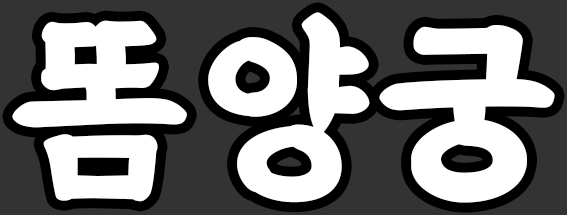
<style>
.page{position:relative;width:567px;height:215px;background:#ffffff}
.page>*{position:absolute;margin:0}
.t1{font:208.3px "BMEULJIRO";letter-spacing:0.04em;color:#ffffff}
</style>
<div class="page">
<p class="t1" style="left:12px;top:12px;width:543px;height:191px">똠양궁</p>
</div>
